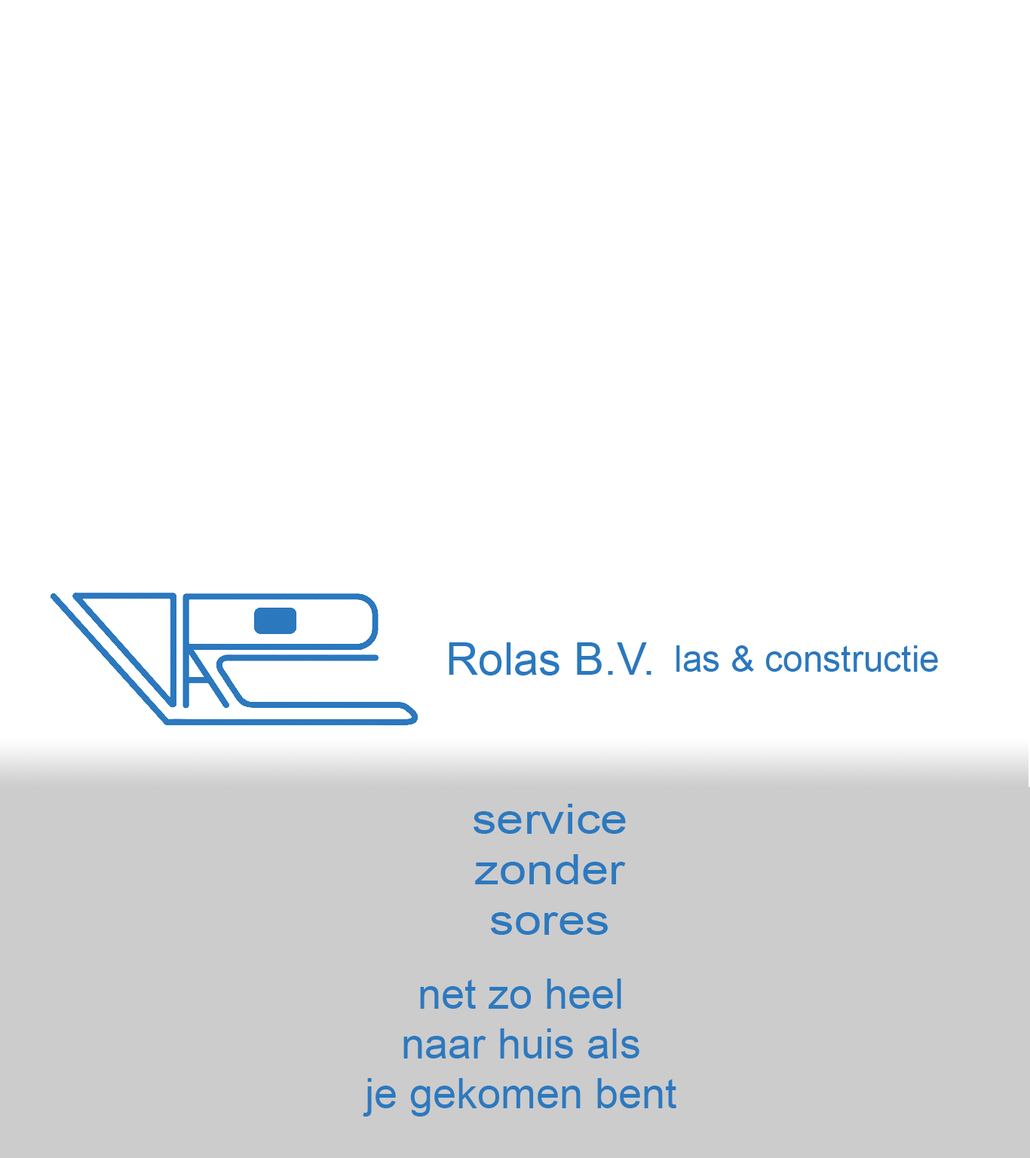
<style>
.page{position:relative;width:1030px;height:1158px;background:#ffffff}
.page>*{position:absolute;margin:0}
.t1{font:45.2px "ArialMT";color:#2b78be}
.t2{font:36.2px "ArialMT";color:#2b78be}
.t3{font:42.1px "ArialMT";color:#2c79bf;scale:1.17 1}
.t4{font:41.4px "ArialMT";color:#2c79bf}
</style>
<div class="page">
<p class="t1" style="left:449px;top:642px;width:202px;height:33px">Rolas B.V.</p>
<p class="t2" style="left:676px;top:645px;width:262px;height:27px">las &amp; constructie</p>
<p class="t3" style="left:473px;top:804px;width:153px;height:131px;text-align:center">service<br>zonder<br>sores</p>
<p class="t4" style="left:363px;top:979px;width:313px;height:137px;text-align:center">net zo heel<br>naar huis als<br>je gekomen bent</p>
</div>
